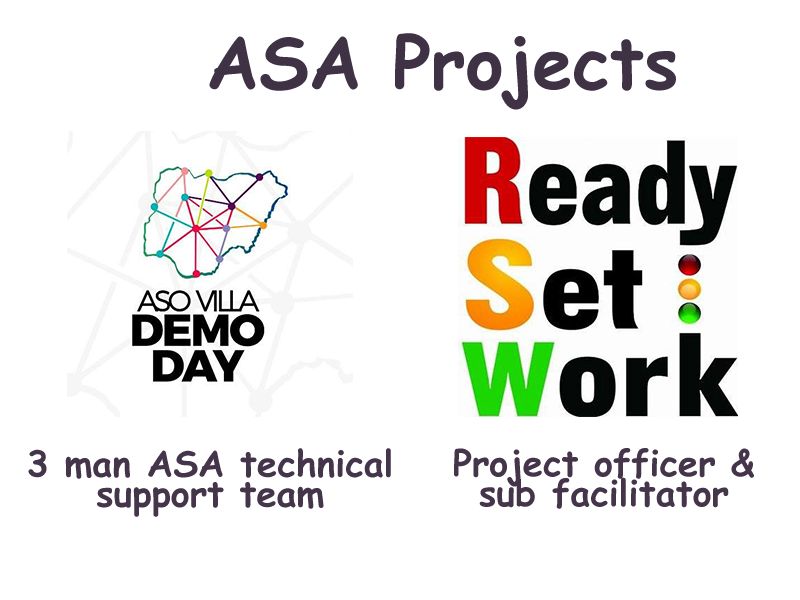
<style>
.page{position:relative;width:800px;height:600px;background:#ffffff}
.page>*{position:absolute;margin:0}
.t1{font:72px "ComicSansMS-Bold";color:#3e3244}
.t2{font:36px/30px "ComicSansMS-Bold";color:#44354b}
.t3{font:36px "ComicSansMS-Bold";color:#44354b}
</style>
<div class="page">
<p class="t1" style="left:209px;top:33px;width:467px;height:77px">ASA Projects</p>
<p class="t2" style="left:28px;top:448px;width:363px;height:69px;text-align:center">3 man ASA technical support team</p>
<p class="t3" style="left:454px;top:448px;width:300px;height:61px">Project officer &amp; sub facilitator</p>
</div>
